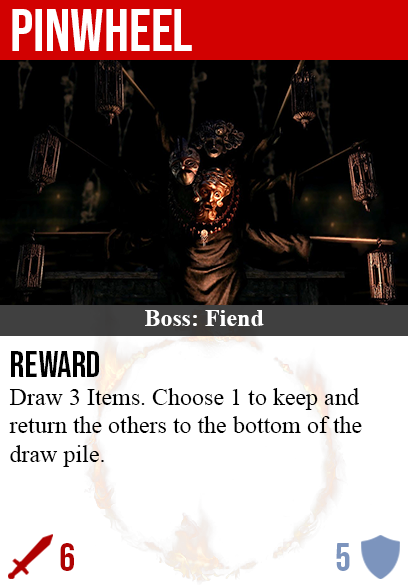
<style>
.page{position:relative;width:408px;height:585px;background:#ffffff}
.page>*{position:absolute;margin:0}
.t1{font:60px "BebasNeue-Regular";color:#ffffff}
.t2{font:24px "TimesNewRomanPS-BoldMT";color:#ffffff}
.t3{font:36px "BebasNeue-Regular";color:#000000}
.t4{font:24px "TimesNewRomanPSMT";color:#000000}
.t5{font:40px "BebasNeue-Regular";color:#af0202}
.t6{font:40px "BebasNeue-Regular";color:#7c94bd}
</style>
<div class="page">
<p class="t1" style="left:12px;top:9px;width:180px;height:42px">pinwheel</p>
<p class="t2" style="left:145px;top:310px;width:119px;height:16px">Boss: Fiend</p>
<p class="t3" style="left:11px;top:351px;width:88px;height:26px">reward</p>
<p class="t4" style="left:9px;top:388px;width:353px;height:79px">Draw 3 Items. Choose 1 to keep and<br>return the others to the bottom of the<br>draw pile.</p>
<p class="t5" style="left:60px;top:543px;width:14px;height:28px">6</p>
<p class="t6" style="left:336px;top:543px;width:14px;height:28px">5</p>
</div>
